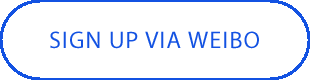
<style>
.page{position:relative;width:310px;height:80px;background:#ffffff}
.page>*{position:absolute;margin:0}
.t1{font:24px "MyriadPro-Regular";letter-spacing:0.05em;color:#1352e2;text-transform:uppercase}
</style>
<div class="page">
<p class="t1" style="left:50px;top:31px;width:209px;height:18px">Sign up via weibo</p>
</div>
